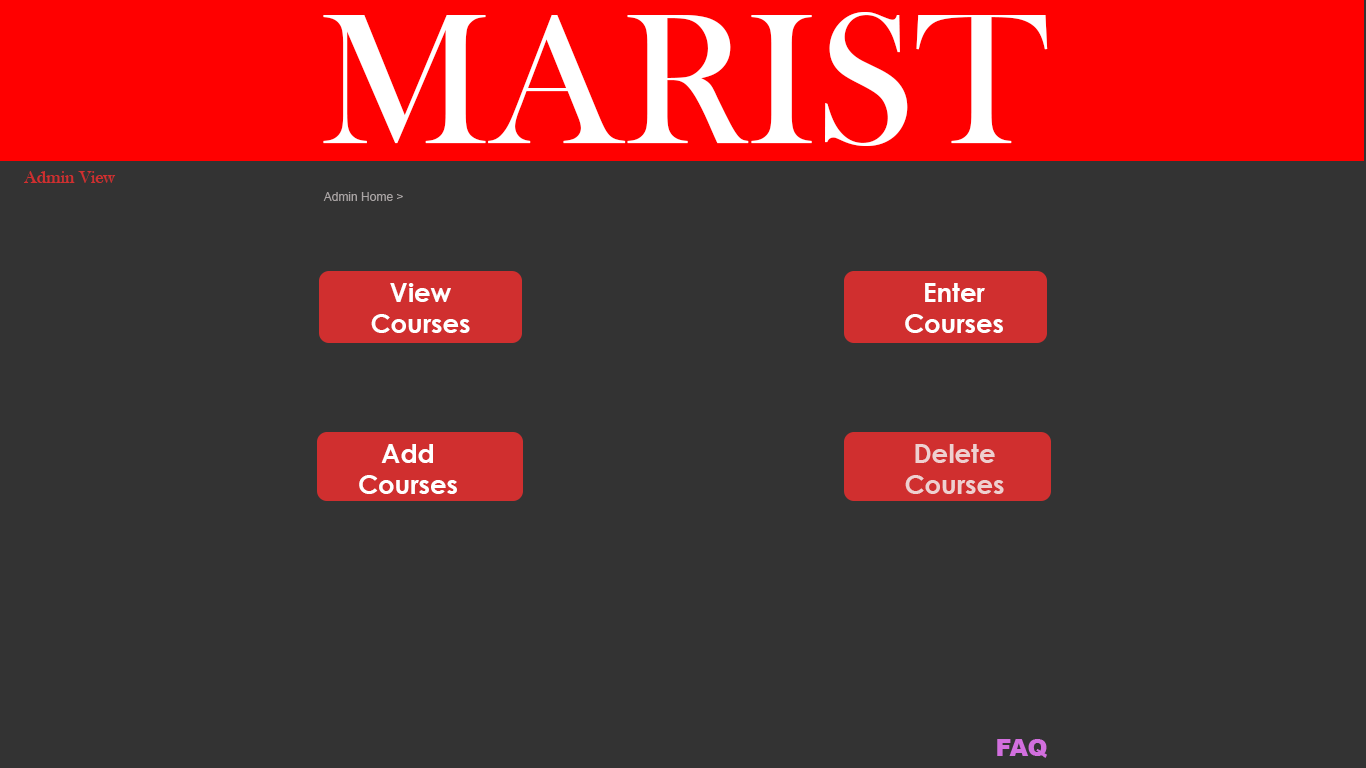
<style>
.page{position:relative;width:1366px;height:768px;background:#333333}
.page>*{position:absolute;margin:0}
.t1{font:192px "BaskOldFace";color:#ffffff}
.t2{font:18px "BaskOldFace";color:#d02f2f}
.t3{font:12px "ArialMT";color:#a9a4a4}
.t4{font:26px "CenturyGothic-Bold";color:#ffffff}
.t5{font:26px "CenturyGothic-Bold";color:#eed0d0}
.t6{font:24px "Arial-Black";color:#d26fde}
</style>
<div class="page">
<p class="t1" style="left:323px;top:12px;width:725px;height:134px">MARIST</p>
<p class="t2" style="left:24px;top:171px;width:92px;height:12px">Admin View</p>
<p class="t3" style="left:323px;top:192px;width:80px;height:9px">Admin Home &gt;</p>
<p class="t4" style="left:371px;top:283px;width:99px;height:50px;text-align:center">View <br>Courses</p>
<p class="t4" style="left:905px;top:283px;width:98px;height:50px;text-align:center">Enter <br>Courses</p>
<p class="t4" style="left:359px;top:444px;width:98px;height:50px;text-align:center">Add<br>Courses</p>
<p class="t5" style="left:905px;top:444px;width:99px;height:50px;text-align:center">Delete <br>Courses</p>
<p class="t6" style="left:997px;top:739px;width:50px;height:19px">FAQ</p>
</div>
